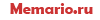
<style>
.page{position:relative;width:100px;height:20px;background:#ffffff}
.page>*{position:absolute;margin:0}
.t1{font:16px "BerlinSansFBDemi-Bold";color:#cc3333}
</style>
<div class="page">
<p class="t1" style="left:10px;top:3px;width:83px;height:11px">Memario.ru</p>
</div>
